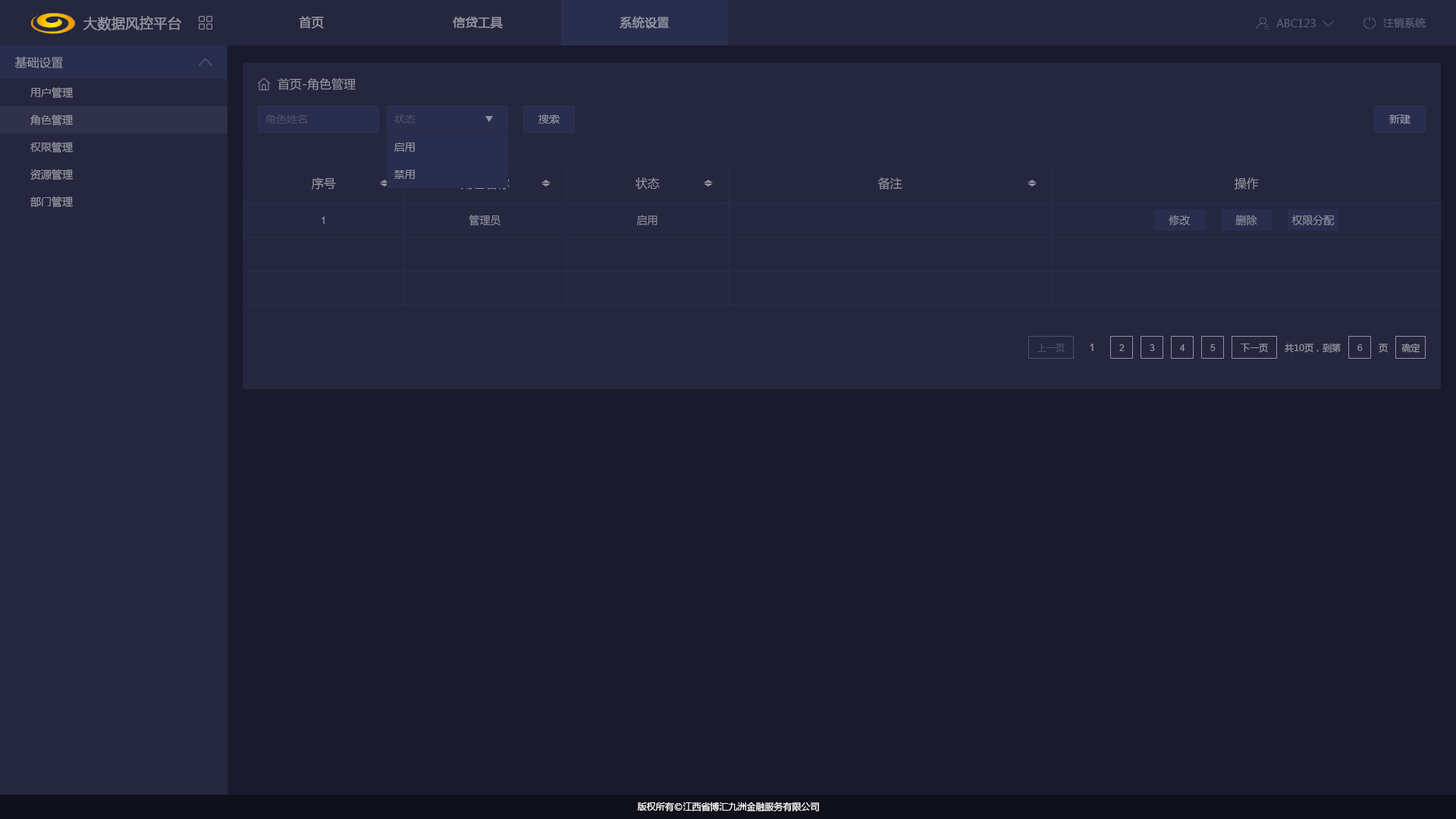
<style>
.page{position:relative;width:1456px;height:819px;background:#191a2c}
.page>*{position:absolute;margin:0}
.t1{font:13.6px "MicrosoftYaHei";color:#92939f;font-weight:bold}
.t2{font:12.1px "MicrosoftYaHei";color:#92939f;font-weight:bold}
.t3{font:10.6px "MicrosoftYaHei";color:#5c6076}
.t4{font:12.1px "MicrosoftYaHei";color:#92939f}
.t5{font:10.6px "MicrosoftYaHei";color:#92939f}
.t6{font:10.6px "MicrosoftYaHei";color:#4d5068}
.t7{font:12.1px "MicrosoftYaHei";color:#292e4f}
.t8{font:10.6px "ArialMT";color:#92939f}
.t9{font:9.1px "MicrosoftYaHei";color:#4d5068}
.t10{font:9.1px "ArialMT";color:#92939f}
.t11{font:9.1px "MicrosoftYaHei";color:#92939f}
.t12{font:9.1px "MicrosoftYaHei";color:#ffffff}
</style>
<div class="page">
<p class="t1" style="left:83px;top:16px;width:98px;height:15px">大数据风控平台</p>
<p class="t2" style="left:299px;top:16px;width:25px;height:13px">首页</p>
<p class="t2" style="left:453px;top:17px;width:50px;height:12px">信贷工具</p>
<p class="t2" style="left:620px;top:16px;width:50px;height:13px">系统设置</p>
<p class="t3" style="left:1383px;top:17px;width:43px;height:11px">注销系统</p>
<p class="t3" style="left:1276px;top:19px;width:40px;height:8px">ABC123</p>
<p class="t4" style="left:14px;top:56px;width:49px;height:12px">基础设置</p>
<p class="t5" style="left:30px;top:87px;width:44px;height:12px">用户管理</p>
<p class="t4" style="left:278px;top:78px;width:78px;height:12px">首页-角色管理</p>
<p class="t5" style="left:30px;top:115px;width:44px;height:11px">角色管理</p>
<p class="t6" style="left:265px;top:115px;width:42px;height:9px">角色姓名</p>
<p class="t6" style="left:394px;top:115px;width:22px;height:9px">状态</p>
<p class="t5" style="left:538px;top:115px;width:22px;height:9px">搜索</p>
<p class="t5" style="left:1389px;top:115px;width:21px;height:9px">新建</p>
<p class="t5" style="left:30px;top:142px;width:44px;height:11px">权限管理</p>
<p class="t5" style="left:394px;top:143px;width:21px;height:9px">启用</p>
<p class="t5" style="left:30px;top:169px;width:44px;height:11px">资源管理</p>
<p class="t5" style="left:394px;top:170px;width:21px;height:9px">禁用</p>
<p class="t4" style="left:311px;top:177px;width:25px;height:13px">序号</p>
<p class="t7" style="left:461px;top:177px;width:49px;height:13px">角色名称</p>
<p class="t4" style="left:635px;top:177px;width:25px;height:13px">状态</p>
<p class="t4" style="left:877px;top:177px;width:25px;height:13px">备注</p>
<p class="t4" style="left:1235px;top:177px;width:24px;height:13px">操作</p>
<p class="t5" style="left:30px;top:196px;width:44px;height:12px">部门管理</p>
<p class="t8" style="left:322px;top:216px;width:3px;height:8px">1</p>
<p class="t5" style="left:469px;top:215px;width:31px;height:11px">管理员</p>
<p class="t5" style="left:636px;top:215px;width:21px;height:11px">启用</p>
<p class="t5" style="left:1169px;top:215px;width:22px;height:11px">修改</p>
<p class="t5" style="left:1235px;top:215px;width:22px;height:11px">删除</p>
<p class="t5" style="left:1291px;top:215px;width:44px;height:11px">权限分配</p>
<p class="t9" style="left:1037px;top:344px;width:28px;height:9px">上一页</p>
<p class="t8" style="left:1090px;top:344px;width:4px;height:7px">1</p>
<p class="t10" style="left:1119px;top:344px;width:6px;height:7px">2</p>
<p class="t10" style="left:1150px;top:344px;width:5px;height:7px">3</p>
<p class="t10" style="left:1180px;top:344px;width:5px;height:7px">4</p>
<p class="t10" style="left:1210px;top:344px;width:6px;height:7px">5</p>
<p class="t11" style="left:1241px;top:344px;width:27px;height:9px">下一页</p>
<p class="t11" style="left:1285px;top:343px;width:56px;height:10px">共10页，到第</p>
<p class="t10" style="left:1357px;top:344px;width:6px;height:7px">6</p>
<p class="t11" style="left:1379px;top:344px;width:9px;height:9px">页</p>
<p class="t11" style="left:1401px;top:343px;width:19px;height:10px">确定</p>
<p class="t12" style="left:637px;top:802px;width:182px;height:9px">版权所有©江西省博汇九洲金融服务有限公司</p>
</div>
